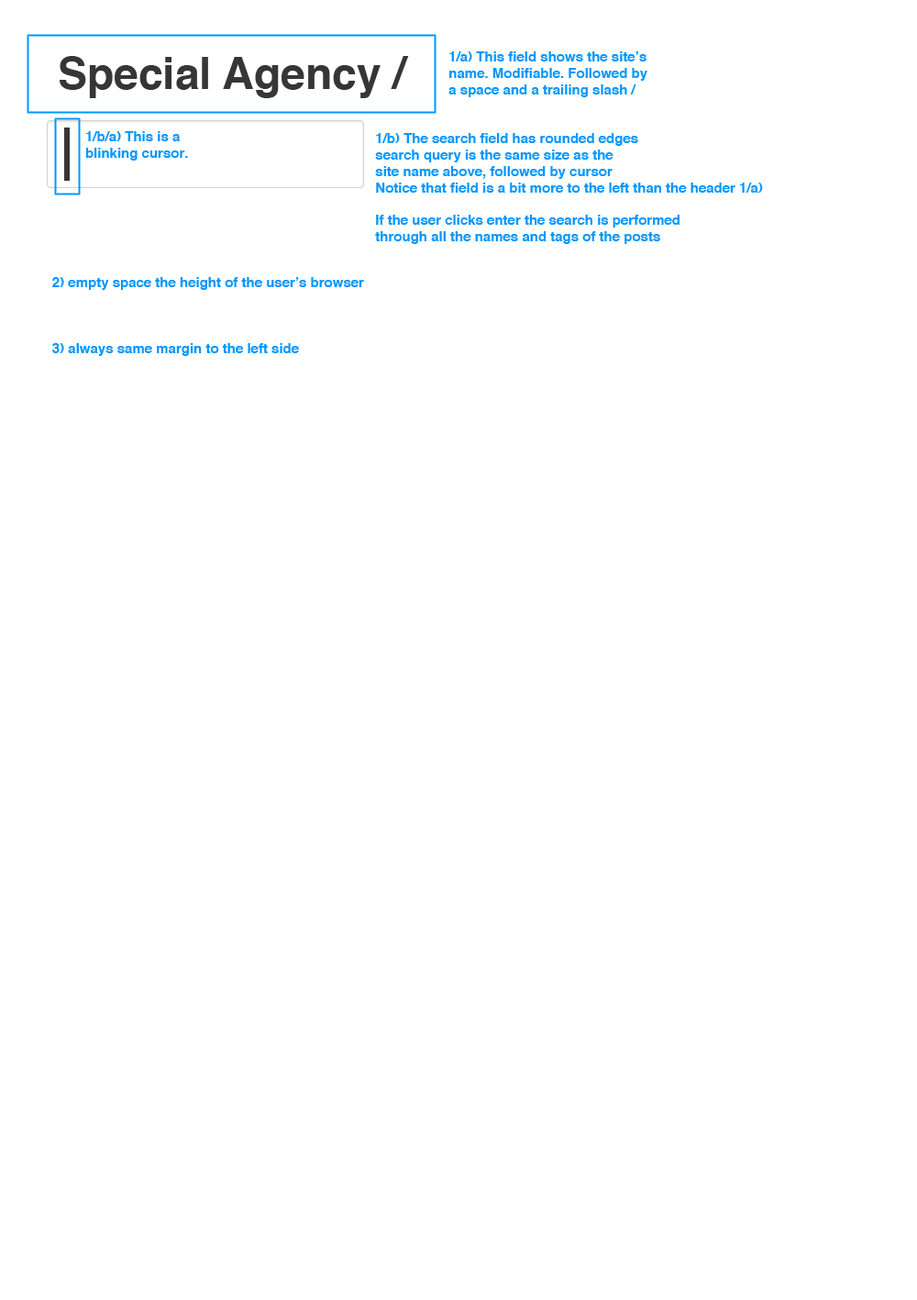
<style>
.page{position:relative;width:917px;height:1300px;background:#ffffff}
.page>*{position:absolute;margin:0}
.t1{font:13.8px "Helvetica-Bold";color:#0096ff}
.t2{font:44px "Helvetica-Bold";color:#363636}
</style>
<div class="page">
<p class="t1" style="left:449px;top:51px;width:199px;height:46px">1/a) This field shows the site’s name. Modifiable. Followed by a space and a trailing slash /</p>
<p class="t2" style="left:60px;top:56px;width:349px;height:42px">Special Agency /</p>
<p class="t1" style="left:85px;top:131px;width:103px;height:30px">1/b/a) This is a blinking cursor.</p>
<p class="t1" style="left:375px;top:133px;width:388px;height:60px">1/b) The search field has rounded edges<br>search query is the same size as the<br>site name above, followed by cursor<br>Notice that field is a bit more to the left than the header 1/a)</p>
<p class="t1" style="left:375px;top:215px;width:305px;height:29px">If the user clicks enter the search is performed<br>through all the names and tags of the posts</p>
<p class="t1" style="left:52px;top:277px;width:312px;height:13px">2) empty space the height of the user’s browser</p>
<p class="t1" style="left:52px;top:343px;width:247px;height:13px">3) always same margin to the left side</p>
</div>
